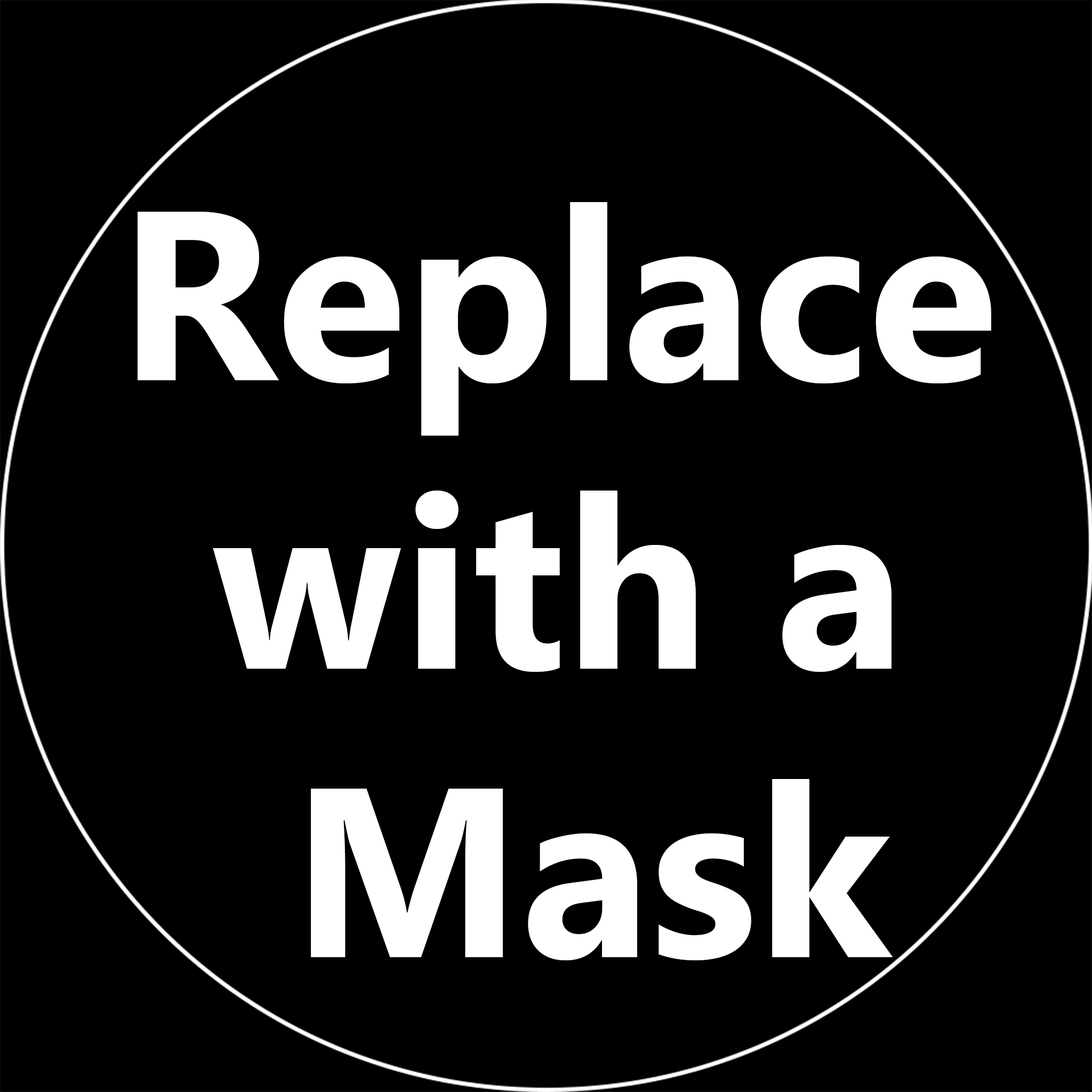
<style>
.page{position:relative;width:1092px;height:1092px;background:#000000}
.page>*{position:absolute;margin:0}
.t1{font:240.4px "MicrosoftTaiLe-Bold";color:#ffffff}
</style>
<div class="page">
<p class="t1" style="left:138px;top:202px;width:853px;height:758px;text-align:center">Replace <br>with a <br>Mask</p>
</div>
